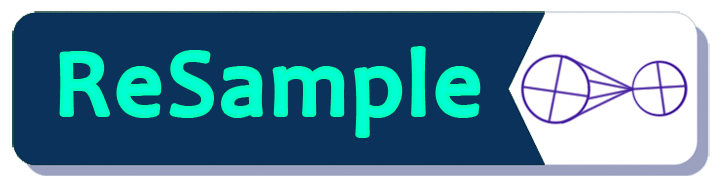
<style>
.page{position:relative;width:719px;height:189px;background:#0b325a}
.page>*{position:absolute;margin:0}
.t1{font:93.8px "Candara";letter-spacing:0.05em;color:#00ffd2}
</style>
<div class="page">
<p class="t1" style="left:62px;top:49px;width:416px;height:86px">ReSample</p>
</div>
